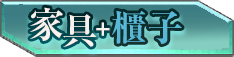
<style>
.page{position:relative;width:234px;height:57px}
.page>*{position:absolute;margin:0}
.t1{font:36px "RyuminPr6N-ExBold";color:#f9f1ed}
.t2{font:36px "RyuminPr6N-ExBold";color:#58b8d6}
.t3{font:24px "RyuminPr6N-ExBold";color:#f9f1ed}
</style>
<div class="page">
<p class="t1" style="left:30px;top:7px;width:34px;height:34px">家</p>
<p class="t1" style="left:63px;top:14px;width:34px;height:33px">具</p>
<p class="t2" style="left:112px;top:10px;width:70px;height:35px">櫃子</p>
<p class="t3" style="left:96px;top:22px;width:14px;height:14px">+</p>
</div>
